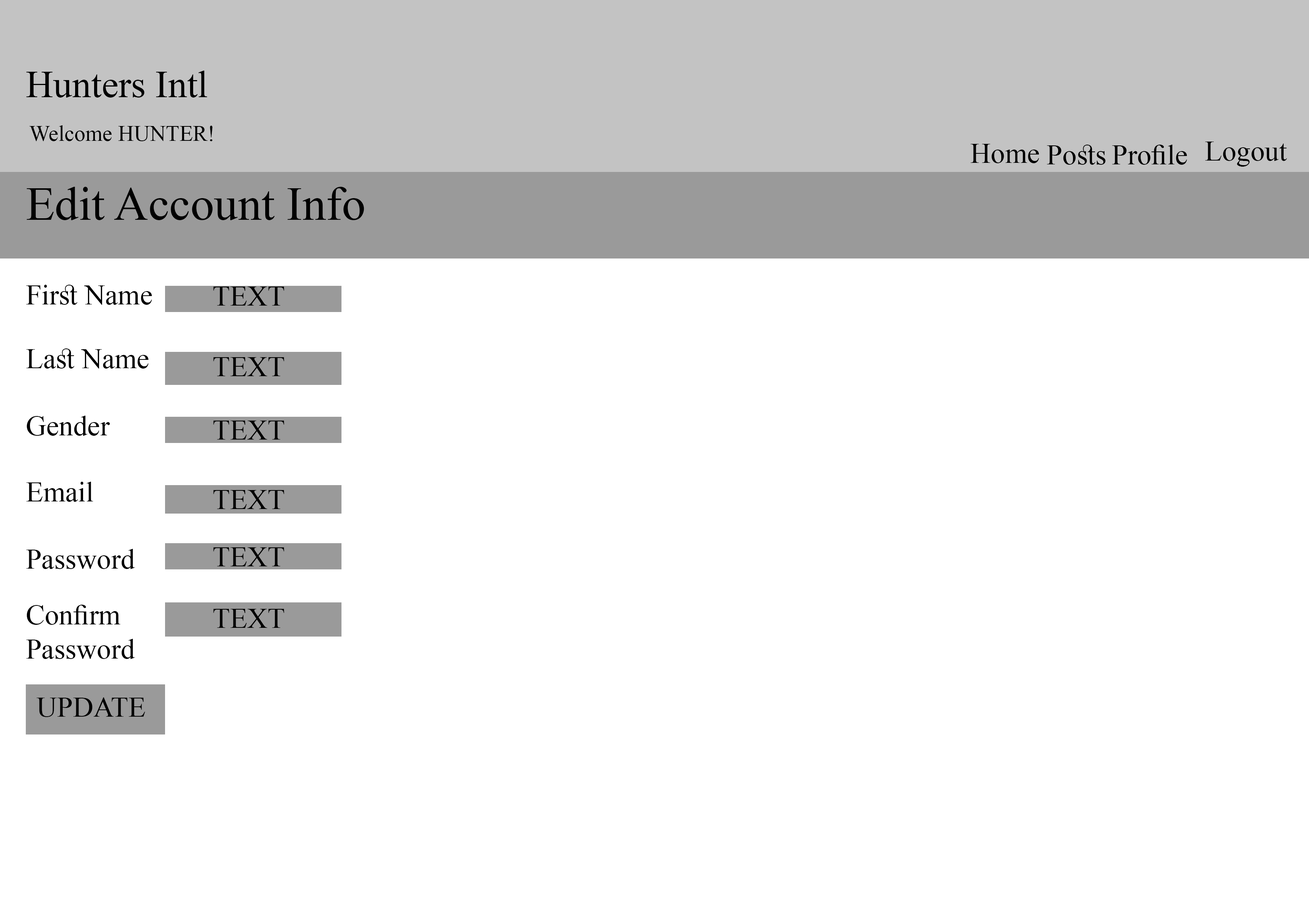
<style>
.page{position:relative;width:1309px;height:911px;background:#ffffff}
.page>*{position:absolute;margin:0}
.t1{font:37.9px "TimesNewRomanPSMT";color:#000000}
.t2{font:22.1px "TimesNewRomanPSMT";color:#000000}
.t3{font:28.5px "TimesNewRomanPSMT";color:#000000}
.t4{font:47.4px "TimesNewRomanPSMT";color:#000000}
</style>
<div class="page">
<p class="t1" style="left:26px;top:71px;width:181px;height:27px">Hunters Intl</p>
<p class="t2" style="left:29px;top:125px;width:184px;height:16px">!Welcome HUNTER</p>
<p class="t3" style="left:971px;top:144px;width:68px;height:19px">Home</p>
<p class="t3" style="left:1047px;top:145px;width:59px;height:20px">Posts</p>
<p class="t3" style="left:1112px;top:145px;width:75px;height:20px">Profile</p>
<p class="t3" style="left:1205px;top:142px;width:82px;height:25px">Logout</p>
<p class="t4" style="left:27px;top:187px;width:337px;height:33px">Edit Account Info</p>
<p class="t3" style="left:26px;top:285px;width:126px;height:20px">First Name</p>
<p class="t3" style="left:213px;top:287px;width:71px;height:18px">TEXT</p>
<p class="t3" style="left:26px;top:348px;width:123px;height:20px">Last Name</p>
<p class="t3" style="left:213px;top:357px;width:71px;height:19px">TEXT</p>
<p class="t3" style="left:27px;top:416px;width:83px;height:20px">Gender</p>
<p class="t3" style="left:213px;top:420px;width:71px;height:19px">TEXT</p>
<p class="t3" style="left:26px;top:482px;width:67px;height:20px">Email</p>
<p class="t3" style="left:213px;top:490px;width:71px;height:19px">TEXT</p>
<p class="t3" style="left:26px;top:549px;width:109px;height:20px">Password</p>
<p class="t3" style="left:213px;top:547px;width:71px;height:19px">TEXT</p>
<p class="t3" style="left:26px;top:605px;width:109px;height:54px;text-align:right">Confirm Password</p>
<p class="t3" style="left:213px;top:609px;width:71px;height:19px">TEXT</p>
<p class="t3" style="left:36px;top:697px;width:109px;height:20px">UPDATE</p>
</div>
